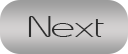
<style>
.page{position:relative;width:128px;height:54px}
.page>*{position:absolute;margin:0}
.t1{font:36px "AsenineWide";color:#2d2d2d}
</style>
<div class="page">
<p class="t1" style="left:28px;top:16px;width:76px;height:21px">Next</p>
</div>
